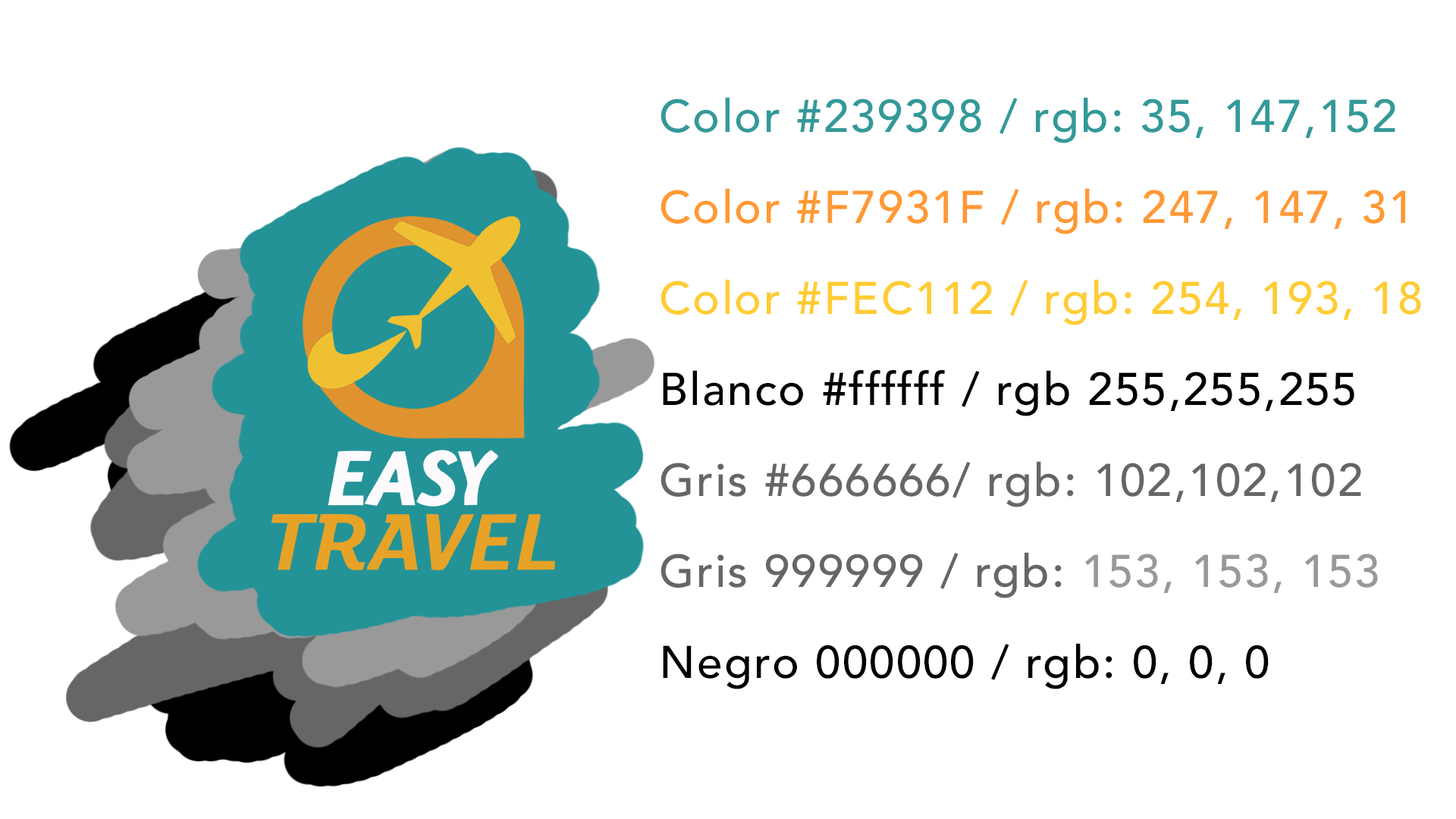
<style>
.page{position:relative;width:1456px;height:819px;background:#ffffff}
.page>*{position:absolute;margin:0}
.t1{font:45.5px/45.5px "Avenir-Medium";letter-spacing:0.04em;color:#666666}
.t2{font:45.5px/45.5px "Avenir-Medium";letter-spacing:0.04em;color:#339999}
.t3{font:45.5px/45.5px "Avenir-Medium";letter-spacing:0.04em;color:#ff9933}
.t4{font:45.5px/45.5px "Avenir-Medium";letter-spacing:0.04em;color:#ffcc33}
.t5{font:45.5px/45.5px "Avenir-Medium";letter-spacing:0.04em;color:#000000}
.t6{font:45.5px/45.5px "Avenir-Medium";letter-spacing:0.04em;color:#999999}
</style>
<div class="page">
<p class="t1" style="left:660px;top:97px;width:761px;height:592px"><span class="t2">Color #239398 / rgb: 35, 147,152<br><br></span><span class="t3">Color #F7931F / rgb: 247, 147, 31 <br><br></span><span class="t4">Color #FEC112 / rgb: 254, 193, 18<br><br></span><span class="t5">Blanco #ffffff / rgb 255,255,255<br><br></span>Gris #666666/ rgb: 102,102,102<br><br>Gris 999999 / rgb: <span class="t6">153, 153, 153<br><br></span><span class="t5">Negro 000000 / rgb: 0, 0, 0</span></p>
</div>
